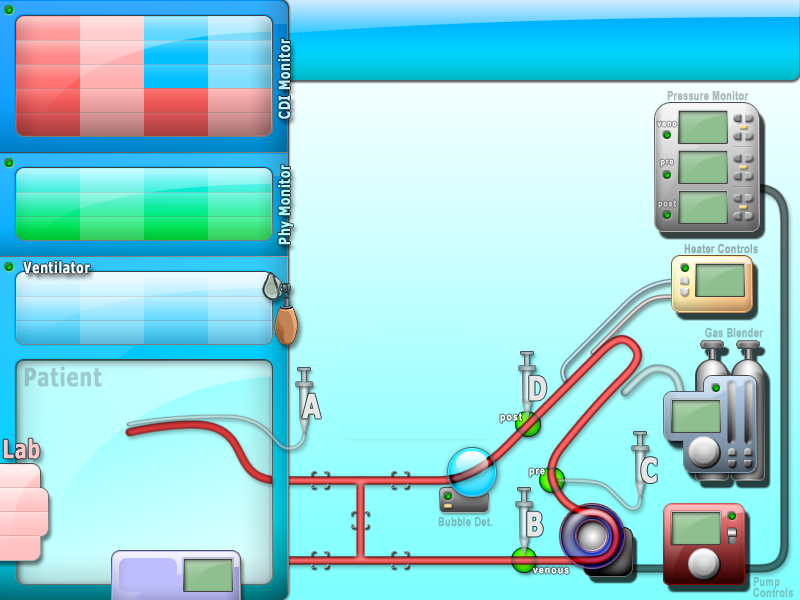
<style>
.page{position:relative;width:800px;height:600px}
.page>*{position:absolute;margin:0}
.t1{font:15.4px "Verdana-Bold";letter-spacing:0.025em;color:#c0efff;font-weight:bold;scale:0.71 1}
.t2{font:12.6px "Arial-BoldMT";letter-spacing:0.025em;color:#acb5b5;font-weight:bold;scale:0.71 1}
.t3{font:9px "Arial-BoldMT";letter-spacing:0.1em;color:#ffffff;scale:0.8 1}
.t4{font:15.4px "Verdana-Bold";letter-spacing:0.025em;color:#aff9fb;font-weight:bold;scale:0.71 1}
.t5{font:9px "Arial-BoldMT";letter-spacing:0.1em;color:#d0d0d0;scale:0.8 1}
.t6{font:12.6px "Arial-BoldMT";letter-spacing:0.025em;color:#94aeae;font-weight:bold;scale:0.71 1}
.t7{font:15.4px "Verdana-Bold";letter-spacing:0.025em;color:#ffffff;font-weight:bold;scale:0.71 1}
.t8{font:12.6px "Arial-BoldMT";letter-spacing:0.025em;color:#8eb8b8;font-weight:bold;scale:0.71 1}
.t9{font:25.2px "Verdana-Bold";letter-spacing:0.025em;color:#9dcbcb;font-weight:bold;scale:0.71 1}
.t10{font:33.6px "Verdana-Bold";letter-spacing:0.025em;color:#e6e6e6;font-weight:bold;scale:0.71 1}
.t11{font:11px "Arial-BoldMT";letter-spacing:0.1em;color:#ffffff;scale:0.8 1}
.t12{font:25.2px "Verdana-Bold";letter-spacing:0.025em;color:#ffc6c6;font-weight:bold;scale:0.71 1}
.t13{font:12.6px "Arial-BoldMT";letter-spacing:0.025em;color:#76bdbd;font-weight:bold;scale:0.71 1}
.t14{font:12.6px "Arial-BoldMT";letter-spacing:0.025em;color:#72c5c5;font-weight:bold;scale:0.71 1}
</style>
<div class="page">
<p class="t1" style="left:278px;top:38px;width:13px;height:81px;rotate:-90deg">CDI Monitor</p>
<p class="t2" style="left:667px;top:91px;width:82px;height:10px">Pressure Monitor</p>
<p class="t3" style="left:657px;top:121px;width:20px;height:6px;opacity:0.71">veno</p>
<p class="t3" style="left:660px;top:159px;width:14px;height:8px;opacity:0.7">pre</p>
<p class="t4" style="left:278px;top:164px;width:15px;height:81px;rotate:-90deg">Phy Monitor</p>
<p class="t5" style="left:658px;top:200px;width:18px;height:9px">post</p>
<p class="t6" style="left:684px;top:243px;width:74px;height:11px">Heater Controls</p>
<p class="t7" style="left:23px;top:261px;width:67px;height:13px">Ventilator</p>
<p class="t8" style="left:705px;top:327px;width:58px;height:11px">Gas Blender</p>
<p class="t9" style="left:24px;top:366px;width:78px;height:21px">Patient</p>
<p class="t10" style="left:529px;top:375px;width:18px;height:26px">D</p>
<p class="t10" style="left:302px;top:393px;width:19px;height:26px">A</p>
<p class="t11" style="left:500px;top:412px;width:22px;height:11px">post</p>
<p class="t12" style="left:3px;top:438px;width:37px;height:21px">Lab</p>
<p class="t10" style="left:641px;top:457px;width:16px;height:26px">C</p>
<p class="t11" style="left:529px;top:468px;width:16px;height:9px">pre</p>
<p class="t13" style="left:438px;top:517px;width:55px;height:10px">Bubble Det.</p>
<p class="t10" style="left:527px;top:511px;width:16px;height:26px">B</p>
<p class="t11" style="left:532px;top:567px;width:37px;height:7px">venous</p>
<p class="t14" style="left:753px;top:577px;width:40px;height:21px">Pump <br>Controls</p>
</div>
